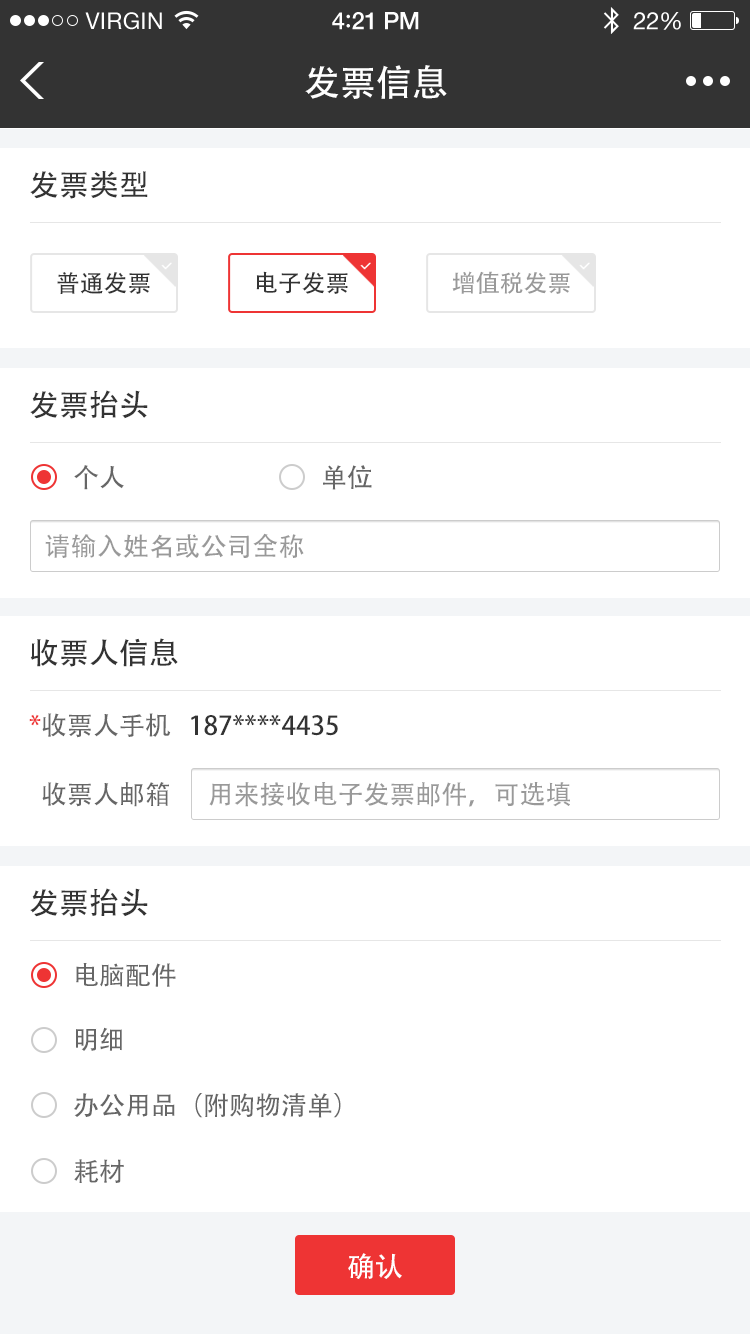
<style>
.page{position:relative;width:750px;height:1334px;background:#ffffff}
.page>*{position:absolute;margin:0}
.t1{font:36px "AdobeHeitiStd-Regular";color:#ffffff}
.t2{font:30px "AdobeHeitiStd-Regular";color:#333333}
.t3{font:24px "AdobeHeitiStd-Regular";color:#333333}
.t4{font:24px "AdobeHeitiStd-Regular";color:#999999}
.t5{font:26px "AdobeHeitiStd-Regular";color:#666666}
.t6{font:26px "AdobeHeitiStd-Regular";color:#999999}
.t7{font:26px "AdobeHeitiStd-Regular";color:#333333}
.t8{font:26px "AdobeHeitiStd-Regular";color:#ee3434}
.t9{font:28px "AdobeHeitiStd-Regular";color:#ffffff}
</style>
<div class="page">
<p class="t1" style="left:305px;top:65px;width:142px;height:34px">发票信息</p>
<p class="t2" style="left:30px;top:171px;width:118px;height:28px">发票类型</p>
<p class="t3" style="left:57px;top:272px;width:93px;height:22px">普通发票</p>
<p class="t3" style="left:256px;top:271px;width:92px;height:23px">电子发票</p>
<p class="t4" style="left:452px;top:271px;width:118px;height:23px">增值税发票</p>
<p class="t2" style="left:30px;top:390px;width:118px;height:29px">发票抬头</p>
<p class="t5" style="left:74px;top:465px;width:50px;height:25px">个人</p>
<p class="t5" style="left:323px;top:465px;width:49px;height:25px">单位</p>
<p class="t6" style="left:45px;top:533px;width:259px;height:25px">请输入姓名或公司全称</p>
<p class="t2" style="left:30px;top:638px;width:148px;height:29px">收票人信息</p>
<p class="t7" style="left:29px;top:713px;width:309px;height:25px"><span class="t8">*</span><span class="t5">收票人手机   </span>187****4435</p>
<p class="t5" style="left:42px;top:782px;width:127px;height:25px">收票人邮箱</p>
<p class="t6" style="left:209px;top:782px;width:361px;height:25px">用来接收电子发票邮件，可选填</p>
<p class="t2" style="left:30px;top:888px;width:118px;height:29px">发票抬头</p>
<p class="t5" style="left:76px;top:963px;width:100px;height:24px">电脑配件</p>
<p class="t5" style="left:76px;top:1027px;width:46px;height:24px">明细</p>
<p class="t5" style="left:74px;top:1093px;width:267px;height:25px">办公用品（附购物清单）</p>
<p class="t5" style="left:74px;top:1159px;width:50px;height:24px">耗材</p>
<p class="t9" style="left:348px;top:1253px;width:54px;height:26px">确认</p>
</div>
